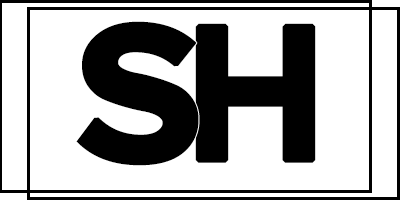
<style>
.page{position:relative;width:400px;height:200px;background:#ffffff}
.page>*{position:absolute;margin:0}
.t1{font:200px "ProximaNova-Bold";color:#000000;font-weight:bold;scale:1.05 1}
.t2{font:200px "ProximaNova-Bold";color:#000000;font-weight:bold;scale:0.95 1}
</style>
<div class="page">
<p class="t1" style="left:76px;top:21px;width:123px;height:145px">S</p>
<p class="t2" style="left:195px;top:23px;width:121px;height:140px">H</p>
</div>
